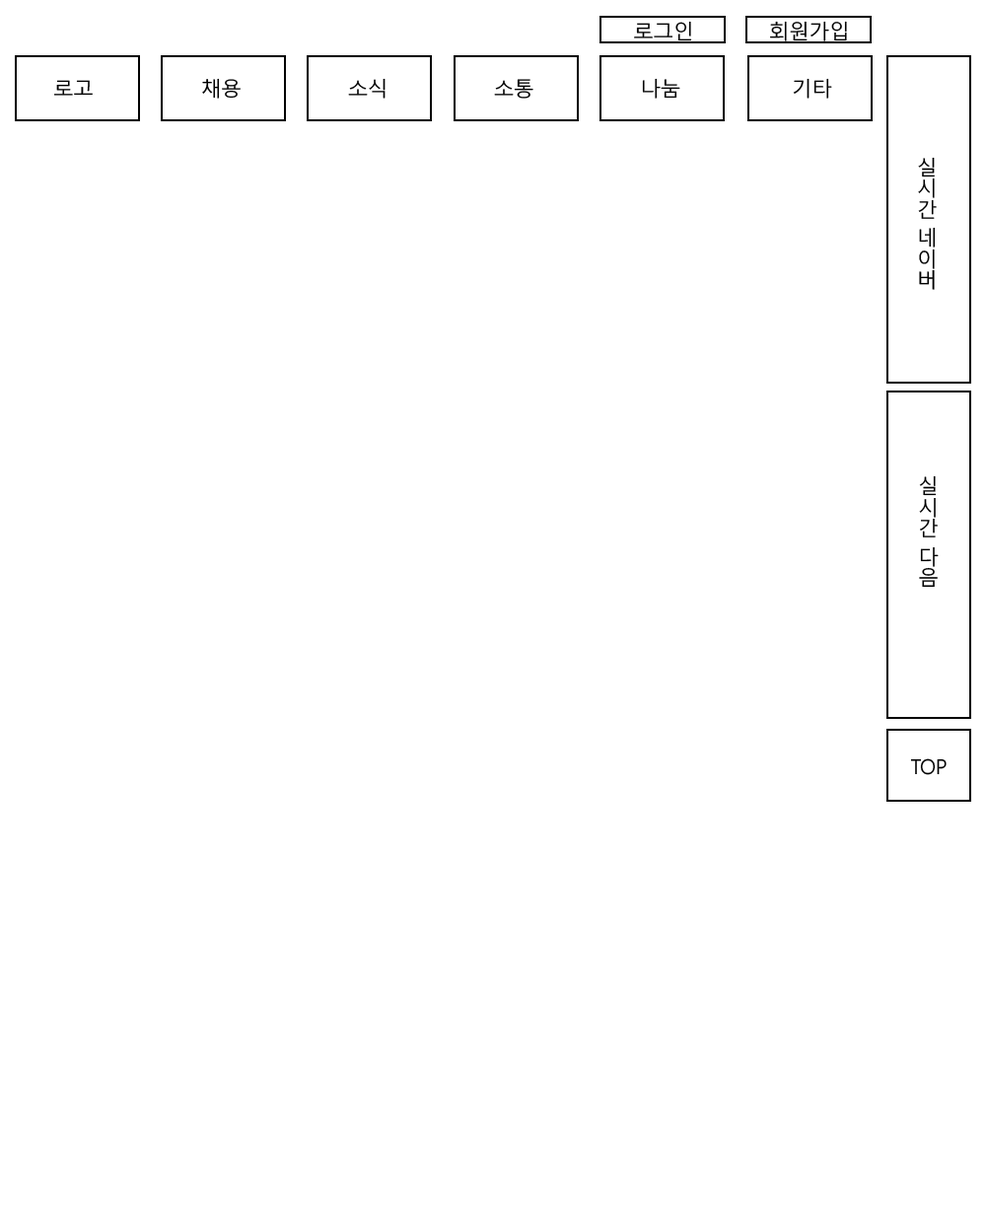
<style>
.page{position:relative;width:986px;height:1210px;background:#ffffff}
.page>*{position:absolute;margin:0}
.t1{font:20.5px "MalgunGothicRegular";letter-spacing:-0.025em;color:#000000}
</style>
<div class="page">
<p class="t1" style="left:634px;top:21px;width:58px;height:20px">로그인</p>
<p class="t1" style="left:770px;top:21px;width:77px;height:20px">회원가입</p>
<p class="t1" style="left:202px;top:78px;width:39px;height:21px">채용</p>
<p class="t1" style="left:348px;top:78px;width:37px;height:21px">소식</p>
<p class="t1" style="left:642px;top:78px;width:38px;height:21px">나눔</p>
<p class="t1" style="left:793px;top:78px;width:39px;height:21px">기타</p>
<p class="t1" style="left:54px;top:80px;width:39px;height:16px">로고</p>
<p class="t1" style="left:494px;top:79px;width:39px;height:20px">소통</p>
<p class="t1" style="left:918px;top:157px;width:19px;height:133px">실시간 네이버</p>
<p class="t1" style="left:919px;top:475px;width:19px;height:113px">실시간 다음</p>
<p class="t1" style="left:910px;top:758px;width:36px;height:17px">TOP</p>
</div>
